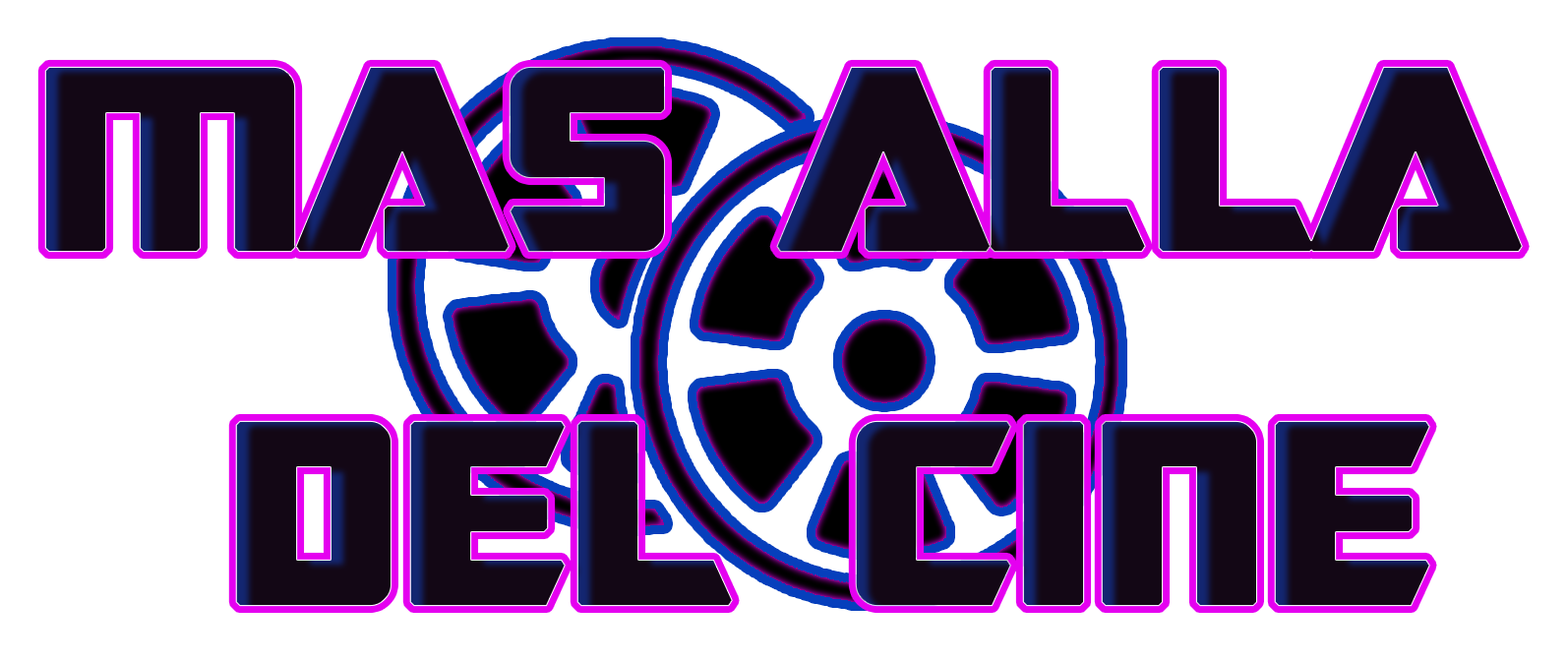
<style>
.page{position:relative;width:1568px;height:662px;background:#ffffff}
.page>*{position:absolute;margin:0}
.t1{font:295.1px "SFTransRobotics";color:#130715;font-weight:bold}
</style>
<div class="page">
<p class="t1" style="left:44px;top:66px;width:1479px;height:541px;text-align:center">MAS ALLA <br>DEL CINE</p>
</div>
